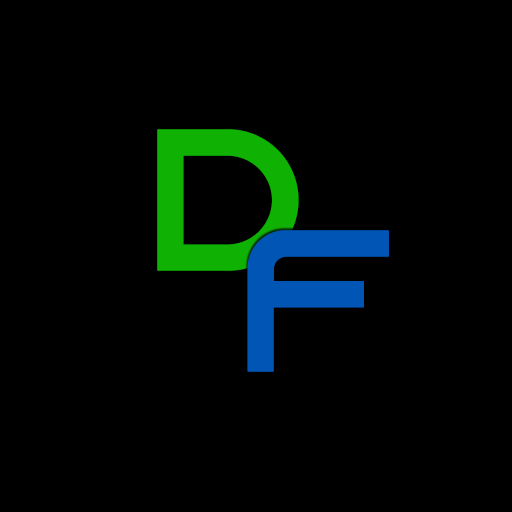
<style>
.page{position:relative;width:512px;height:512px;background:#000000}
.page>*{position:absolute;margin:0}
.t1{font:200px "AzonixRegular";color:#0fb103;font-weight:bold}
.t2{font:200px "AzonixRegular";color:#0055b5;font-weight:bold}
</style>
<div class="page">
<p class="t1" style="left:157px;top:129px;width:142px;height:142px">D</p>
<p class="t2" style="left:247px;top:230px;width:142px;height:142px">F</p>
</div>
